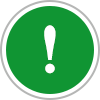
<style>
.page{position:relative;width:100px;height:100px;background:#109533}
.page>*{position:absolute;margin:0}
.t1{font:75px "KannadaMN-Bold";letter-spacing:-0.01em;color:#ffffff}
</style>
<div class="page">
<p class="t1" style="left:44px;top:25px;width:12px;height:49px">!</p>
</div>
